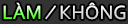
<style>
.page{position:relative;width:128px;height:24px;background:#333333}
.page>*{position:absolute;margin:0}
.t1{font:20px "Corbel"}
.t2{font:20px "Corbel";color:#e6e6e6}
.t3{font:20px "Corbel";color:#dfdfdf}
</style>
<div class="page">
<p class="t1" style="left:3px;top:2px;width:38px;height:17px">LÀM</p>
<p class="t2" style="left:45px;top:5px;width:11px;height:15px">⁄</p>
<p class="t3" style="left:60px;top:2px;width:66px;height:18px">KHÔNG</p>
</div>
